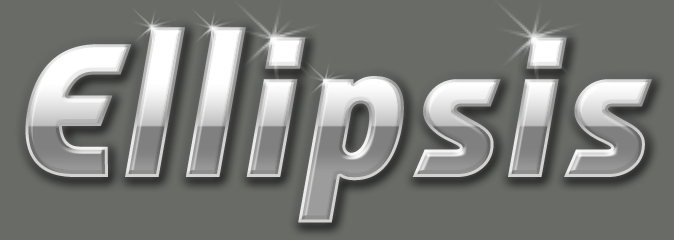
<style>
.page{position:relative;width:674px;height:240px;background:#686b66}
.page>*{position:absolute;margin:0}
.t1{font:211.9px "Casiopea-Ultra";letter-spacing:0.04em;font-style:italic}
</style>
<div class="page">
<p class="t1" style="left:25px;top:27px;width:627px;height:196px">Ellipsis</p>
</div>
